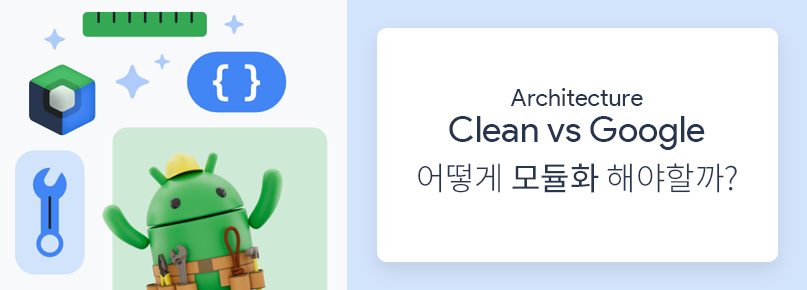
<style>
.page{position:relative;width:807px;height:290px;background:#ffffff}
.page>*{position:absolute;margin:0}
.t1{font:36px/36px "ProductSans-Regular";color:#27354e}
.t2{font:36px/48px "ProductSans-Bold";color:#073042}
.t3{font:24px/36px "ProductSans-Regular";color:#27354e}
.t4{font:32px/48px "NotoSansKR-Light";color:#27354e}
.t5{font:32px/48px "NotoSansKR-Regular";color:#27354e}
</style>
<div class="page">
<p class="t1" style="left:418px;top:88px;width:319px;height:105px;text-align:center"><span class="t2"><br></span><span class="t3">Architecture<br></span>Clean vs Google<br><span class="t4">어떻게 </span><span class="t5">모듈화</span><span class="t4"> 해야할까?</span></p>
</div>
